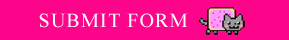
<style>
.page{position:relative;width:289px;height:40px;background:#fc058b}
.page>*{position:absolute;margin:0}
.t1{font:20px "TimesNewRomanPSMT";letter-spacing:0.06em;color:#ffffff;text-transform:uppercase}
</style>
<div class="page">
<p class="t1" style="left:39px;top:13px;width:149px;height:15px">Submit form</p>
</div>
